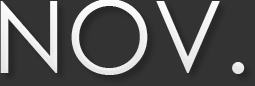
<style>
.page{position:relative;width:255px;height:86px;background:#333333}
.page>*{position:absolute;margin:0}
.t1{font:100px "CenturyGothic";color:#ffffff}
</style>
<div class="page">
<p class="t1" style="left:0px;top:0px;width:245px;height:75px">NOV.</p>
</div>
